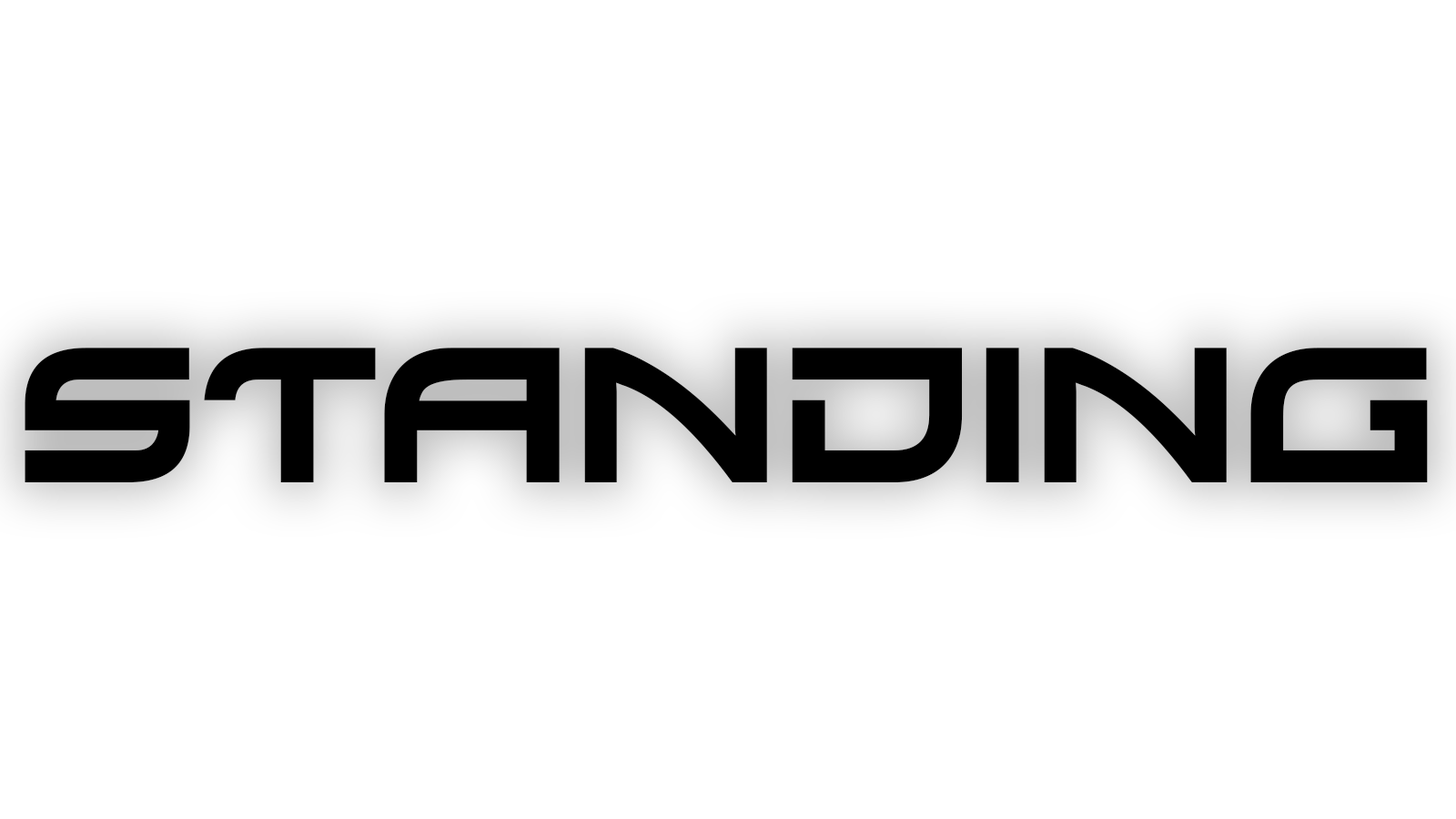
<style>
.page{position:relative;width:1456px;height:819px;background:#ffffff}
.page>*{position:absolute;margin:0}
.t1{font:192.1px "Xirod-Regular";color:#000000}
</style>
<div class="page">
<p class="t1" style="left:25px;top:348px;width:1403px;height:134px">Standing</p>
</div>
